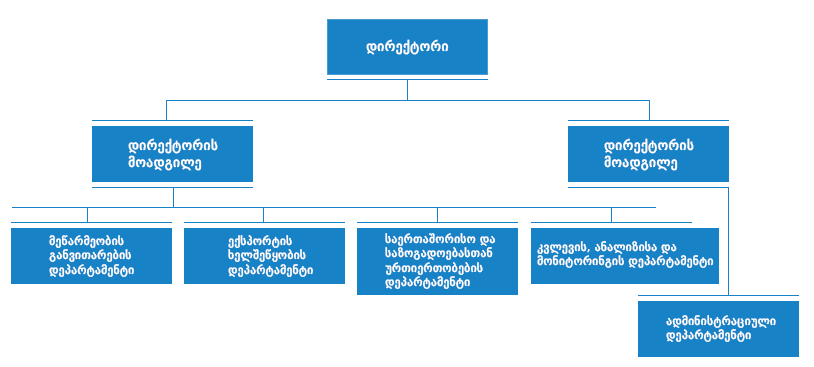
<style>
.page{position:relative;width:814px;height:367px;background:#ffffff}
.page>*{position:absolute;margin:0}
.t1{font:14px "BPGWeb002";color:#ffffff}
.t2{font:12px "BPGWeb002";color:#ffffff}
</style>
<div class="page">
<p class="t1" style="left:366px;top:39px;width:83px;height:16px">დირექტორი</p>
<p class="t1" style="left:128px;top:138px;width:90px;height:33px">დირექტორის<br>მოადგილე</p>
<p class="t1" style="left:604px;top:138px;width:90px;height:33px">დირექტორის<br>მოადგილე</p>
<p class="t2" style="left:385px;top:233px;width:111px;height:56px">საერთაშორისო და <br>საზოგადოებასთან<br>ურთიერთობების<br>დეპარტამენტი</p>
<p class="t2" style="left:49px;top:235px;width:85px;height:42px">მეწარმეობის <br>განვითარების<br>დეპარტამენტი</p>
<p class="t2" style="left:228px;top:235px;width:85px;height:42px">ექსპორტის <br>ხელშეწყობის<br>დეპარტამენტი</p>
<p class="t2" style="left:537px;top:241px;width:177px;height:27px">კვლევის, ანალიზისა და <br>მონიტორინგის დეპარტამენტი</p>
<p class="t2" style="left:666px;top:315px;width:110px;height:27px">ადმინისტრაციული<br>დეპარტამენტი</p>
</div>
